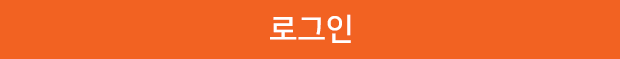
<style>
.page{position:relative;width:620px;height:59px;background:#f26222}
.page>*{position:absolute;margin:0}
.t1{font:31px "NanumSquareB";color:#ffffff}
</style>
<div class="page">
<p class="t1" style="left:270px;top:14px;width:81px;height:29px">로그인</p>
</div>
